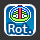
<style>
.page{position:relative;width:40px;height:40px;background:#333333}
.page>*{position:absolute;margin:0}
.t1{font:12px "JK-Gothic-M";color:#ffffff}
</style>
<div class="page">
<p class="t1" style="left:8px;top:24px;width:24px;height:10px">Rot.</p>
</div>
